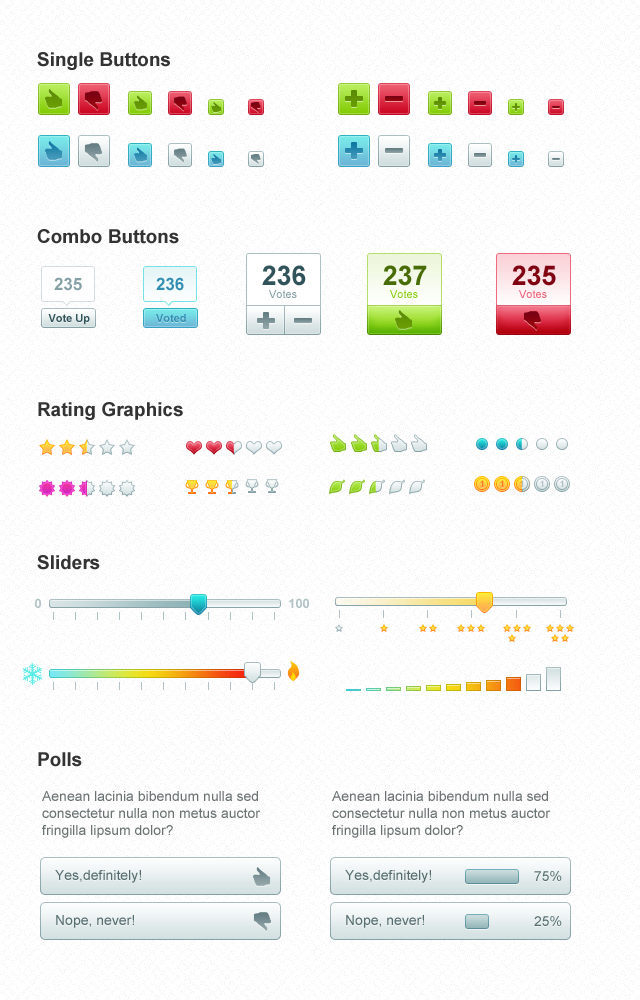
<style>
.page{position:relative;width:640px;height:1000px;background:#ffffff}
.page>*{position:absolute;margin:0}
.t1{font:19px "Arial-BoldMT";color:#333333}
.t2{font:27px "Arial-BoldMT";color:#31535a}
.t3{font:27px "Arial-BoldMT";color:#486c06}
.t4{font:27px "Arial-BoldMT";color:#800211}
.t5{font:17px "Arial-BoldMT";color:#84a0a5}
.t6{font:17px "Arial-BoldMT";color:#318eb2}
.t7{font:11px "ArialMT";color:#84a0a5}
.t8{font:11px "ArialMT";color:#88ce0d}
.t9{font:11px "ArialMT";color:#ed6277}
.t10{font:11px "Arial-BoldMT";color:#31535a}
.t11{font:11px "Arial-BoldMT";color:#318eb2}
.t12{font:9px "Arial-BoldMT";color:#ff7519}
.t13{font:9px "Arial-BoldMT";color:#b0c2c6}
.t14{font:9px "Arial-BoldMT";color:#acbfc3}
.t15{font:13px "Arial-BoldMT";color:#b0c2c6}
.t16{font:14px "ArialMT";color:#6a7272}
.t17{font:14px "ArialMT";color:#556d6f}
</style>
<div class="page">
<p class="t1" style="left:37px;top:52px;width:133px;height:18px">Single Buttons</p>
<p class="t1" style="left:37px;top:229px;width:142px;height:15px">Combo Buttons</p>
<p class="t2" style="left:262px;top:265px;width:44px;height:21px">236</p>
<p class="t3" style="left:383px;top:265px;width:44px;height:21px">237</p>
<p class="t4" style="left:512px;top:265px;width:44px;height:21px">235</p>
<p class="t5" style="left:54px;top:277px;width:28px;height:14px">235</p>
<p class="t6" style="left:156px;top:277px;width:28px;height:14px">236</p>
<p class="t7" style="left:269px;top:290px;width:28px;height:8px">Votes</p>
<p class="t8" style="left:390px;top:290px;width:28px;height:8px">Votes</p>
<p class="t9" style="left:519px;top:290px;width:28px;height:8px">Votes</p>
<p class="t10" style="left:48px;top:314px;width:42px;height:11px">Vote Up</p>
<p class="t11" style="left:156px;top:314px;width:30px;height:8px">Voted</p>
<p class="t1" style="left:38px;top:402px;width:145px;height:18px">Rating Graphics</p>
<p class="t12" style="left:480px;top:480px;width:4px;height:7px">1</p>
<p class="t12" style="left:500px;top:480px;width:4px;height:7px">1</p>
<p class="t13" style="left:520px;top:480px;width:4px;height:7px">1</p>
<p class="t13" style="left:540px;top:480px;width:4px;height:7px">1</p>
<p class="t14" style="left:560px;top:480px;width:4px;height:7px">1</p>
<p class="t1" style="left:37px;top:555px;width:63px;height:15px">Sliders</p>
<p class="t15" style="left:35px;top:598px;width:6px;height:10px">0</p>
<p class="t15" style="left:289px;top:598px;width:20px;height:10px">100</p>
<p class="t1" style="left:38px;top:752px;width:44px;height:15px">Polls</p>
<p class="t16" style="left:42px;top:791px;width:219px;height:47px">Aenean lacinia bibendum nulla sed consectetur nulla non metus auctor fringilla lipsum dolor?</p>
<p class="t16" style="left:332px;top:791px;width:219px;height:47px">Aenean lacinia bibendum nulla sed consectetur nulla non metus auctor fringilla lipsum dolor?</p>
<p class="t17" style="left:55px;top:870px;width:86px;height:13px">Yes,definitely!</p>
<p class="t17" style="left:345px;top:870px;width:86px;height:13px">Yes,definitely!</p>
<p class="t17" style="left:534px;top:871px;width:28px;height:10px">75%</p>
<p class="t17" style="left:56px;top:915px;width:78px;height:13px">Nope, never!</p>
<p class="t17" style="left:346px;top:915px;width:78px;height:13px">Nope, never!</p>
<p class="t17" style="left:534px;top:916px;width:28px;height:10px">25%</p>
</div>
